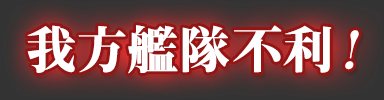
<style>
.page{position:relative;width:384px;height:100px}
.page>*{position:absolute;margin:0}
.t1{font:50px "KochoStd-Heavy";letter-spacing:0.004em;color:#ffffff;font-weight:bold}
.t2{font:50px "KochoStd-Heavy";letter-spacing:0.004em;color:#ffffff;font-weight:bold;font-style:italic}
</style>
<div class="page">
<p class="t1" style="left:27px;top:25px;width:332px;height:49px">我方艦隊不利<span class="t2">！</span></p>
</div>
